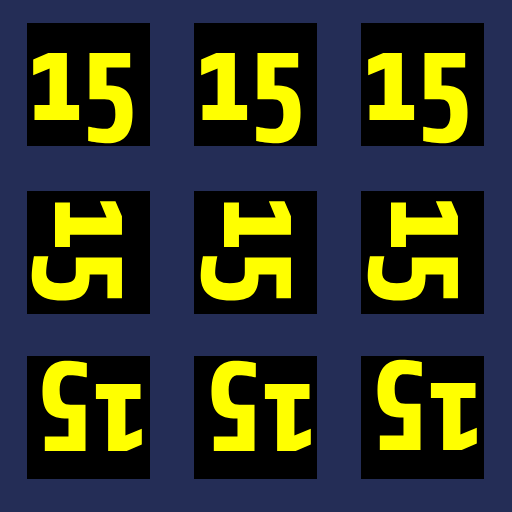
<style>
.page{position:relative;width:512px;height:512px;background:#242d56}
.page>*{position:absolute;margin:0}
.t1{font:130px "Share-BoldOSF";color:#ffff00}
</style>
<div class="page">
<p class="t1" style="left:33px;top:53px;width:100px;height:91px">15</p>
<p class="t1" style="left:201px;top:53px;width:100px;height:91px">15</p>
<p class="t1" style="left:368px;top:53px;width:100px;height:91px">15</p>
<p class="t1" style="left:31px;top:201px;width:91px;height:100px;rotate:90deg">15</p>
<p class="t1" style="left:200px;top:201px;width:91px;height:100px;rotate:90deg">15</p>
<p class="t1" style="left:367px;top:201px;width:91px;height:100px;rotate:90deg">15</p>
<p class="t1" style="left:42px;top:360px;width:100px;height:91px;rotate:-180deg">15</p>
<p class="t1" style="left:211px;top:360px;width:100px;height:91px;rotate:-180deg">15</p>
<p class="t1" style="left:377px;top:359px;width:100px;height:91px;rotate:-180deg">15</p>
</div>
